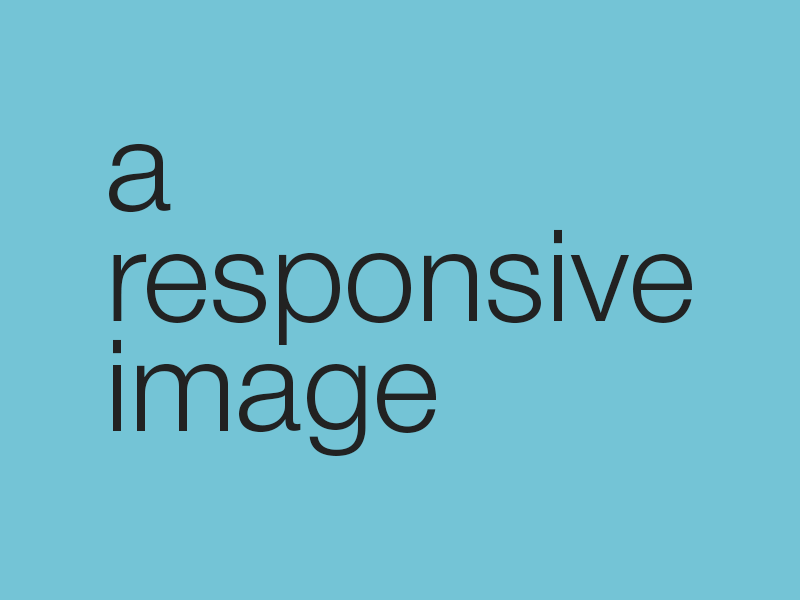
<style>
.page{position:relative;width:800px;height:600px;background:#74c4d6}
.page>*{position:absolute;margin:0}
.t1{font:128px/110px "Helvetica-4-Light";color:#222222}
</style>
<div class="page">
<p class="t1" style="left:109px;top:143px;width:583px;height:313px">a<br>responsive<br>image</p>
</div>
